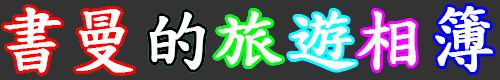
<style>
.page{position:relative;width:500px;height:80px;background:#333333}
.page>*{position:absolute;margin:0}
.t1{font:70px "DFKaiShu-SB-Estd-BF";color:#ffffff;font-weight:bold}
</style>
<div class="page">
<p class="t1" style="left:4px;top:6px;width:489px;height:67px">書曼的旅遊相簿</p>
<p class="t1" style="left:4px;top:7px;width:412px;height:66px">書曼的旅遊相</p>
<p class="t1" style="left:4px;top:7px;width:352px;height:66px">書曼的旅遊</p>
<p class="t1" style="left:4px;top:7px;width:278px;height:66px">書曼的旅</p>
<p class="t1" style="left:4px;top:7px;width:201px;height:66px">書曼的</p>
<p class="t1" style="left:4px;top:7px;width:129px;height:66px">書曼</p>
</div>
